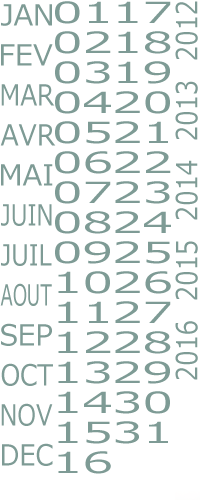
<style>
.page{position:relative;width:200px;height:500px;background:#ffffff}
.page>*{position:absolute;margin:0}
.t1{font:29px "Meiryo";color:#7e9b95}
.t2{font:29px "Meiryo";color:#7e9b95;scale:1.69 1}
.t3{font:29px "Meiryo";color:#7e9b95;scale:0.85 1}
.t4{font:29px "Meiryo";color:#7e9b95;scale:0.86 1}
.t5{font:29px "Meiryo";color:#7e9b95;scale:0.92 1}
.t6{font:29px "Meiryo";color:#7e9b95;scale:0.79 1}
.t7{font:29px "Meiryo";color:#7e9b95;scale:0.83 1}
.t8{font:29px "Meiryo";color:#7e9b95;scale:0.63 1}
.t9{font:29px "Meiryo";color:#7e9b95;scale:0.88 1}
.t10{font:29px "Meiryo";color:#7e9b95;scale:0.84 1}
.t11{font:29px "Meiryo";color:#7e9b95;scale:0.91 1}
</style>
<div class="page">
<p class="t1" style="left:1px;top:4px;width:51px;height:22px">JAN</p>
<p class="t2" style="left:55px;top:1px;width:53px;height:23px">01</p>
<p class="t2" style="left:118px;top:1px;width:53px;height:22px">17</p>
<p class="t3" style="left:175px;top:1px;width:23px;height:59px;rotate:-90deg">2012</p>
<p class="t2" style="left:55px;top:31px;width:56px;height:23px">02</p>
<p class="t2" style="left:118px;top:31px;width:53px;height:23px">18</p>
<p class="t1" style="left:1px;top:44px;width:52px;height:22px">FEV</p>
<p class="t2" style="left:55px;top:61px;width:55px;height:23px">03</p>
<p class="t2" style="left:118px;top:61px;width:52px;height:23px">19</p>
<p class="t4" style="left:1px;top:84px;width:54px;height:22px">MAR</p>
<p class="t3" style="left:175px;top:81px;width:23px;height:59px;rotate:-90deg">2013</p>
<p class="t2" style="left:55px;top:91px;width:56px;height:23px">04</p>
<p class="t2" style="left:115px;top:91px;width:55px;height:23px">20</p>
<p class="t5" style="left:0px;top:124px;width:56px;height:22px">AVR</p>
<p class="t2" style="left:55px;top:121px;width:55px;height:23px">05</p>
<p class="t2" style="left:115px;top:121px;width:53px;height:22px">21</p>
<p class="t2" style="left:55px;top:151px;width:56px;height:23px">06</p>
<p class="t2" style="left:115px;top:151px;width:56px;height:22px">22</p>
<p class="t3" style="left:175px;top:160px;width:23px;height:60px;rotate:-90deg">2014</p>
<p class="t1" style="left:1px;top:164px;width:52px;height:22px">MAI</p>
<p class="t2" style="left:55px;top:181px;width:56px;height:23px">07</p>
<p class="t2" style="left:115px;top:181px;width:55px;height:23px">23</p>
<p class="t6" style="left:1px;top:204px;width:51px;height:22px">JUIN</p>
<p class="t2" style="left:55px;top:211px;width:56px;height:23px">08</p>
<p class="t2" style="left:115px;top:211px;width:56px;height:22px">24</p>
<p class="t7" style="left:1px;top:244px;width:51px;height:22px">JUIL</p>
<p class="t2" style="left:55px;top:241px;width:55px;height:23px">09</p>
<p class="t2" style="left:115px;top:241px;width:55px;height:23px">25</p>
<p class="t3" style="left:175px;top:241px;width:23px;height:59px;rotate:-90deg">2015</p>
<p class="t2" style="left:58px;top:271px;width:52px;height:23px">10</p>
<p class="t2" style="left:115px;top:271px;width:56px;height:23px">26</p>
<p class="t8" style="left:0px;top:283px;width:52px;height:23px">AOUT</p>
<p class="t2" style="left:58px;top:301px;width:50px;height:22px">11</p>
<p class="t2" style="left:115px;top:301px;width:56px;height:22px">27</p>
<p class="t1" style="left:1px;top:323px;width:51px;height:23px">SEP</p>
<p class="t3" style="left:175px;top:321px;width:23px;height:59px;rotate:-90deg">2016</p>
<p class="t2" style="left:58px;top:331px;width:53px;height:22px">12</p>
<p class="t2" style="left:115px;top:331px;width:56px;height:23px">28</p>
<p class="t9" style="left:1px;top:363px;width:52px;height:23px">OCT</p>
<p class="t2" style="left:58px;top:361px;width:52px;height:23px">13</p>
<p class="t2" style="left:115px;top:361px;width:55px;height:23px">29</p>
<p class="t2" style="left:58px;top:391px;width:53px;height:22px">14</p>
<p class="t2" style="left:115px;top:391px;width:55px;height:23px">30</p>
<p class="t10" style="left:1px;top:403px;width:52px;height:23px">NOV</p>
<p class="t2" style="left:58px;top:421px;width:52px;height:23px">15</p>
<p class="t2" style="left:115px;top:421px;width:53px;height:23px">31</p>
<p class="t11" style="left:2px;top:443px;width:51px;height:23px">DEC</p>
<p class="t2" style="left:58px;top:451px;width:53px;height:23px">16</p>
</div>
